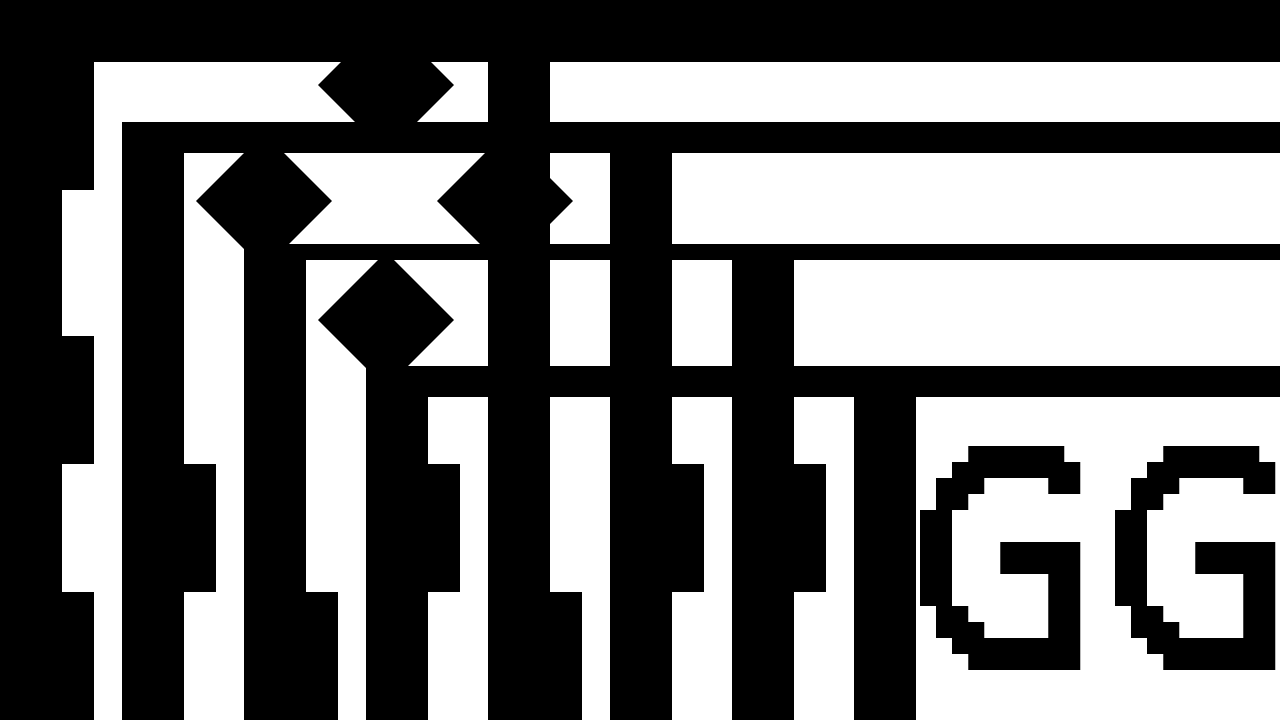
<style>
.page{position:relative;width:1280px;height:720px;background:#000000}
.page>*{position:absolute;margin:0}
.t1{font:256px "Terminal";letter-spacing:0.01em;color:#000000}
</style>
<div class="page">
<p class="t1" style="left:920px;top:446px;width:356px;height:224px">GG</p>
</div>
